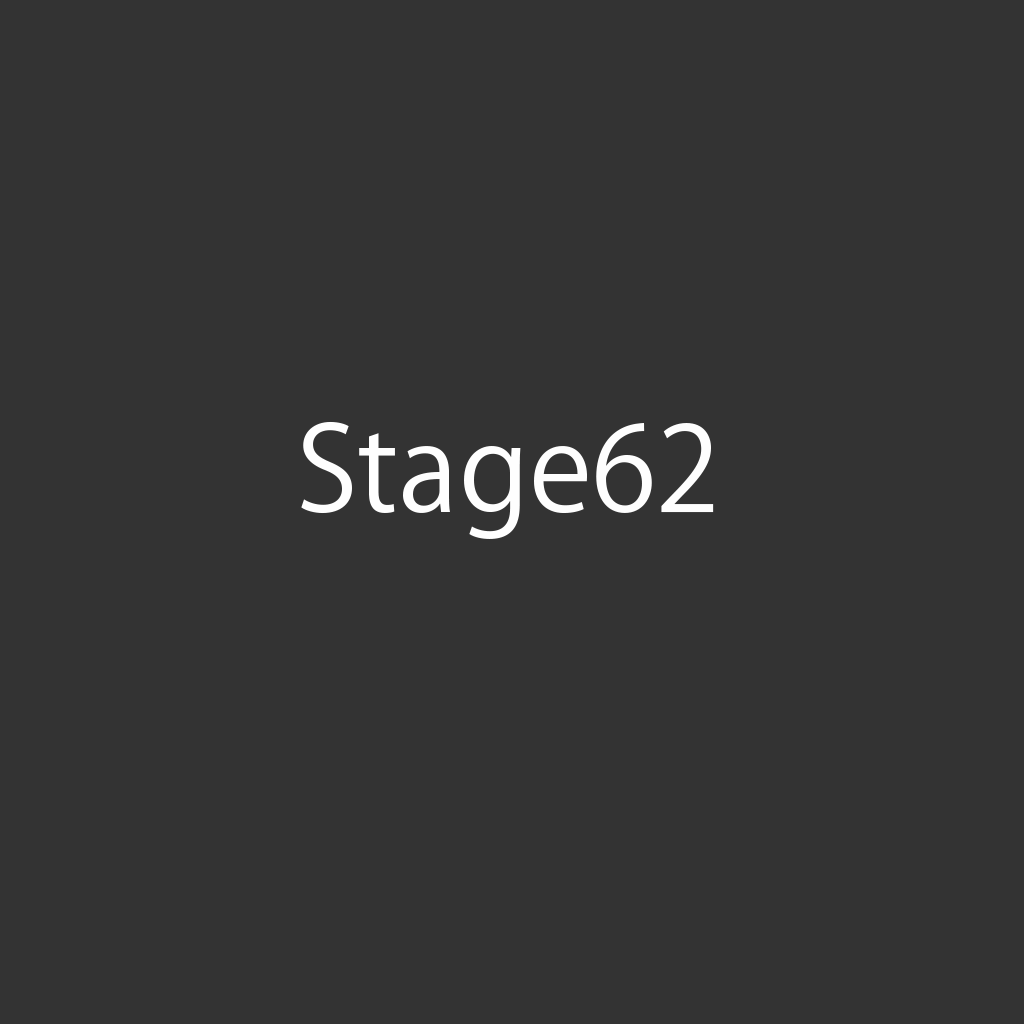
<style>
.page{position:relative;width:1024px;height:1024px;background:#333333}
.page>*{position:absolute;margin:0}
.t1{font:116.7px "KozGoPr6N-Regular";color:#fefefe}
</style>
<div class="page">
<p class="t1" style="left:301px;top:421px;width:413px;height:118px">Stage62</p>
</div>
